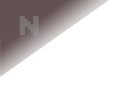
<style>
.page{position:relative;width:140px;height:110px;background:#ffffff}
.page>*{position:absolute;margin:0}
.t1{font:37.5px "ArcadeClassic";letter-spacing:0.12em;color:#7b7373}
</style>
<div class="page">
<p class="t1" style="left:19px;top:16px;width:20px;height:19px">n</p>
</div>
